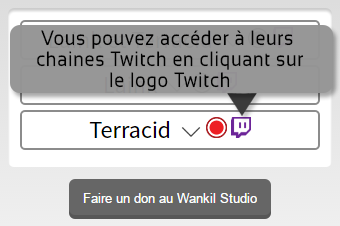
<style>
.page{position:relative;width:340px;height:226px;background:#ffffff}
.page>*{position:absolute;margin:0}
.t1{font:20.7px/21px "Sansation-Regular";letter-spacing:0.04em;color:#000000;scale:0.87 1}
</style>
<div class="page">
<p class="t1" style="left:37px;top:30px;width:267px;height:61px;text-align:center">Vous pouvez accéder à leurs <br>chaines Twitch en cliquant sur<br>le logo Twitch</p>
</div>
